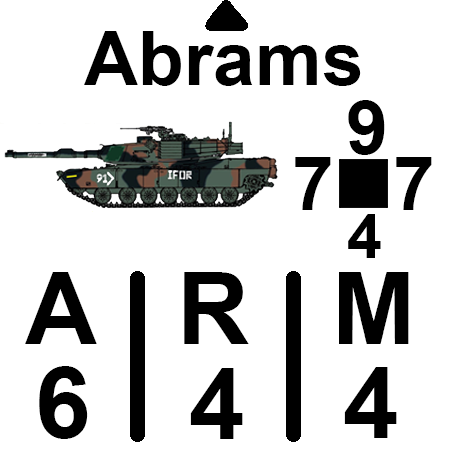
<style>
.page{position:relative;width:450px;height:450px;background:#ffffff}
.page>*{position:absolute;margin:0}
.t1{font:75px "Arial-BoldMT";color:#000000}
.t2{font:62.5px "Arial-BoldMT";color:#000000}
.t3{font:100px "Arial-BoldMT";color:#000000}
</style>
<div class="page">
<p class="t1" style="left:84px;top:31px;width:277px;height:55px">Abrams</p>
<p class="t1" style="left:348px;top:100px;width:37px;height:55px">9</p>
<p class="t1" style="left:295px;top:157px;width:36px;height:53px">7</p>
<p class="t1" style="left:396px;top:157px;width:36px;height:53px">7</p>
<p class="t2" style="left:348px;top:214px;width:33px;height:44px">4</p>
<p class="t3" style="left:25px;top:272px;width:384px;height:72px">A   R   M</p>
<p class="t3" style="left:39px;top:366px;width:49px;height:73px">6</p>
<p class="t3" style="left:190px;top:368px;width:53px;height:71px">4</p>
<p class="t3" style="left:344px;top:367px;width:53px;height:71px">4</p>
</div>
